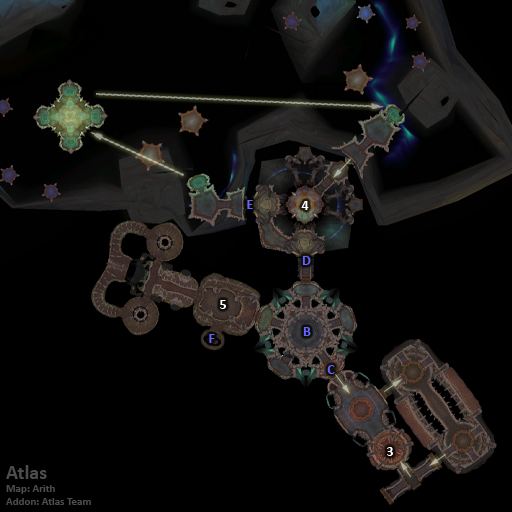
<style>
.page{position:relative;width:512px;height:512px;background:#000000}
.page>*{position:absolute;margin:0}
.t1{font:14px "Calibri-Bold";color:#6666ff}
.t2{font:14px "Calibri-Bold";color:#ffffff}
</style>
<div class="page">
<p class="t1" style="left:247px;top:200px;width:6px;height:9px">E</p>
<p class="t2" style="left:301px;top:201px;width:8px;height:9px">4</p>
<p class="t1" style="left:302px;top:256px;width:9px;height:9px">D</p>
<p class="t2" style="left:220px;top:300px;width:6px;height:9px">5</p>
<p class="t1" style="left:303px;top:327px;width:8px;height:9px">B</p>
<p class="t1" style="left:209px;top:334px;width:6px;height:9px">F</p>
<p class="t1" style="left:327px;top:365px;width:8px;height:9px">C</p>
<p class="t2" style="left:387px;top:447px;width:6px;height:9px">3</p>
</div>
